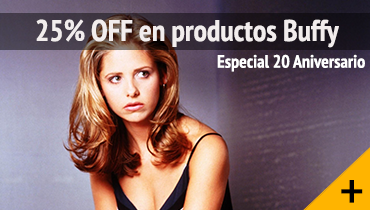
<style>
.page{position:relative;width:370px;height:210px}
.page>*{position:absolute;margin:0}
.t1{font:30px "PTSans-NarrowBold";color:#f2eded}
.t2{font:18px "PTSans-NarrowBold";color:#ffffff}
.t3{font:60px "PTSans-Narrow";color:#000000}
</style>
<div class="page">
<p class="t1" style="left:36px;top:19px;width:303px;height:29px">25% OFF en productos Buffy</p>
<p class="t2" style="left:217px;top:54px;width:148px;height:18px">Especial 20 Aniversario</p>
<p class="t3" style="left:341px;top:180px;width:22px;height:23px">+</p>
</div>
